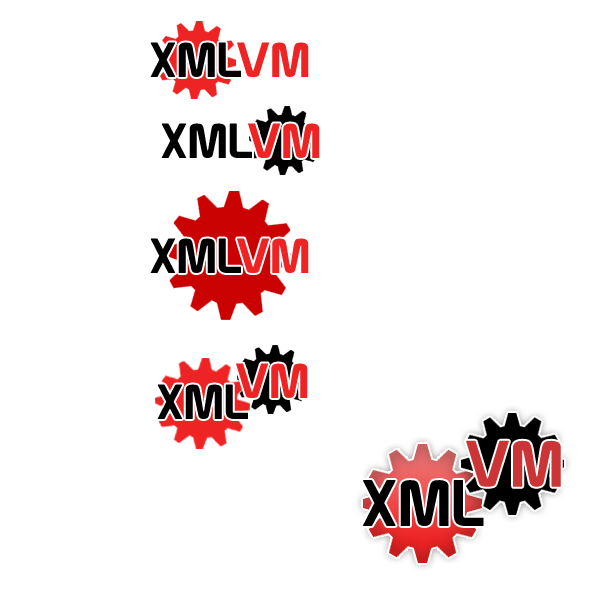
<style>
.page{position:relative;width:600px;height:600px;background:#ffffff}
.page>*{position:absolute;margin:0}
.t1{font:48px "Prototype";color:#000000}
.t2{font:48px "Prototype";color:#ee2323}
.t3{font:64px "Prototype";color:#cc3535}
.t4{font:64px "Prototype";color:#000000}
</style>
<div class="page">
<p class="t1" style="left:150px;top:42px;width:159px;height:35px">XML<span class="t2">VM</span></p>
<p class="t1" style="left:161px;top:123px;width:159px;height:35px">XML<span class="t2">VM</span></p>
<p class="t1" style="left:150px;top:238px;width:159px;height:35px">XML<span class="t2">VM</span></p>
<p class="t2" style="left:236px;top:363px;width:72px;height:35px">VM</p>
<p class="t1" style="left:157px;top:384px;width:91px;height:35px">XML</p>
<p class="t3" style="left:466px;top:440px;width:95px;height:47px">VM</p>
<p class="t4" style="left:363px;top:480px;width:121px;height:46px">XML</p>
</div>
